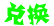
<style>
.page{position:relative;width:54px;height:26px;background:#ffffff}
.page>*{position:absolute;margin:0}
.t1{font:22px "FZJZJW--GB1-0";color:#0ef902}
</style>
<div class="page">
<p class="t1" style="left:4px;top:2px;width:22px;height:23px;rotate:14deg">兑</p>
<p class="t1" style="left:27px;top:3px;width:23px;height:23px;rotate:-9deg">换</p>
</div>
